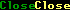
<style>
.page{position:relative;width:70px;height:10px;background:#000000}
.page>*{position:absolute;margin:0}
.t1{font:13.2px "Onesize";color:#009900;scale:0.91 1}
.t2{font:13.2px "Onesize";color:#ffff66;scale:0.91 1}
</style>
<div class="page">
<p class="t1" style="left:0px;top:1px;width:35px;height:8px">Close</p>
<p class="t2" style="left:35px;top:1px;width:35px;height:8px">Close</p>
</div>
